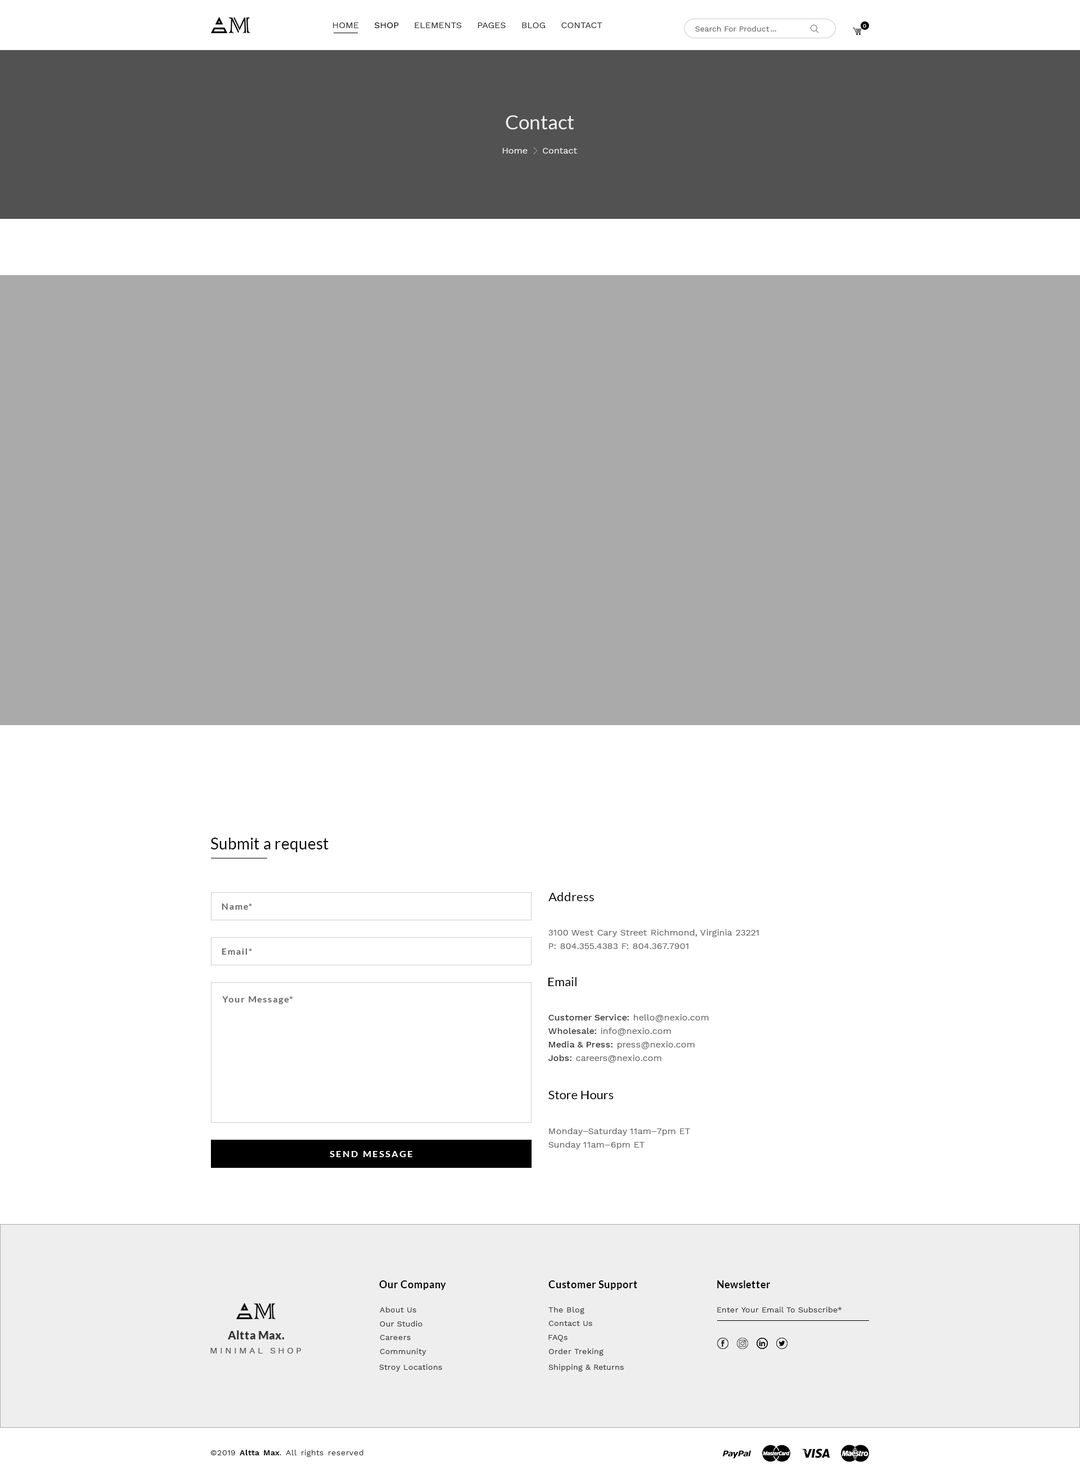
<style>
.page{position:relative;width:1080px;height:1484px;background:#ffffff}
.page>*{position:absolute;margin:0}
.t1{font:9px "WorkSans-Regular";color:#333333}
.t2{font:9px "WorkSans-Regular";color:#000000}
.t3{font:7.9px "WorkSans-Regular";color:#666666}
.t4{font:5.6px "WorkSans-Regular";color:#ffffff}
.t5{font:19.7px "Lato-Regular";color:#eeeeee}
.t6{font:9px "WorkSans-Regular";color:#eeeeee}
.t7{font:15.8px "Lato-Regular";letter-spacing:0.01em;color:#000000}
.t8{font:12.4px "Lato-Regular";letter-spacing:0.01em;color:#000000}
.t9{font:9px "Lato-Bold";letter-spacing:0.1em;color:#666666}
.t10{font:9px/13.5px "WorkSans-Regular";letter-spacing:0.01em;color:#666666}
.t11{font:9px/13.5px "WorkSans-Medium";letter-spacing:0.01em;color:#333333}
.t12{font:9px "Lato-Bold";letter-spacing:0.16em;color:#ffffff}
.t13{font:10.1px "Lato-Bold";letter-spacing:0.03em;color:#000000}
.t14{font:7.9px "WorkSans-Regular";letter-spacing:0.03em;color:#333333}
.t15{font:11.2px "Lato-Black";letter-spacing:0.03em;color:#333333}
.t16{font:9px "WorkSans-Regular";letter-spacing:0.25em;color:#555555}
.t17{font:7.9px "WorkSans-SemiBold";letter-spacing:0.03em;color:#000000}
</style>
<div class="page">
<p class="t1" style="left:333px;top:22px;width:269px;height:6px">HOME     <span class="t2">SHOP</span>     ELEMENTS     PAGES     BLOG     CONTACT</p>
<p class="t3" style="left:695px;top:26px;width:75px;height:6px">Search For Product</p>
<p class="t4" style="left:863px;top:24px;width:3px;height:4px">0</p>
<p class="t3" style="left:771px;top:30px;width:5px;height:2px">...</p>
<p class="t5" style="left:506px;top:115px;width:68px;height:14px">Contact</p>
<p class="t6" style="left:502px;top:148px;width:26px;height:6px">Home</p>
<p class="t6" style="left:543px;top:148px;width:34px;height:6px">Contact</p>
<p class="t7" style="left:211px;top:838px;width:117px;height:14px">Submit a request</p>
<p class="t8" style="left:548px;top:892px;width:46px;height:9px">Address</p>
<p class="t9" style="left:222px;top:903px;width:30px;height:7px">Name*</p>
<p class="t10" style="left:548px;top:929px;width:211px;height:20px">3100 West Cary Street Richmond, Virginia 23221<br>P: 804.355.4383 F: 804.367.7901</p>
<p class="t9" style="left:222px;top:948px;width:30px;height:7px">Email*</p>
<p class="t8" style="left:548px;top:977px;width:29px;height:9px">Email</p>
<p class="t9" style="left:222px;top:996px;width:70px;height:8px">Your Message*</p>
<p class="t11" style="left:548px;top:1014px;width:161px;height:49px">Customer Service:<span class="t10"> hello@nexio.com<br></span>Wholesale:<span class="t10"> info@nexio.com<br></span>Media &amp; Press:<span class="t10"> press@nexio.com<br></span>Jobs:<span class="t10"> careers@nexio.com</span></p>
<p class="t8" style="left:548px;top:1091px;width:66px;height:8px">Store Hours</p>
<p class="t10" style="left:548px;top:1128px;width:142px;height:21px">Monday–Saturday 11am–7pm ET<br>Sunday 11am–6pm ET</p>
<p class="t12" style="left:330px;top:1151px;width:82px;height:6px">SEND MESSAGE</p>
<p class="t13" style="left:379px;top:1280px;width:67px;height:10px">Our Company</p>
<p class="t13" style="left:548px;top:1280px;width:89px;height:10px">Customer Support</p>
<p class="t13" style="left:717px;top:1280px;width:53px;height:8px">Newsletter</p>
<p class="t14" style="left:380px;top:1307px;width:36px;height:5px">About Us</p>
<p class="t14" style="left:548px;top:1307px;width:36px;height:7px">The Blog</p>
<p class="t14" style="left:717px;top:1307px;width:125px;height:5px">Enter Your Email To Subscribe*</p>
<p class="t14" style="left:380px;top:1321px;width:42px;height:5px">Our Studio</p>
<p class="t14" style="left:548px;top:1321px;width:44px;height:5px">Contact Us</p>
<p class="t15" style="left:228px;top:1330px;width:57px;height:9px">Altta Max.</p>
<p class="t14" style="left:380px;top:1335px;width:31px;height:5px">Careers</p>
<p class="t14" style="left:548px;top:1335px;width:20px;height:7px">FAQs</p>
<p class="t16" style="left:210px;top:1348px;width:92px;height:5px">MINIMAL SHOP</p>
<p class="t14" style="left:380px;top:1348px;width:46px;height:8px">Community</p>
<p class="t14" style="left:548px;top:1348px;width:56px;height:8px">Order Treking</p>
<p class="t14" style="left:379px;top:1364px;width:63px;height:7px">Stroy Locations</p>
<p class="t14" style="left:548px;top:1364px;width:76px;height:7px">Shipping &amp; Returns</p>
<p class="t14" style="left:210px;top:1450px;width:153px;height:7px">©2019 <span class="t17">Altta Max</span>. All rights reserved</p>
</div>
